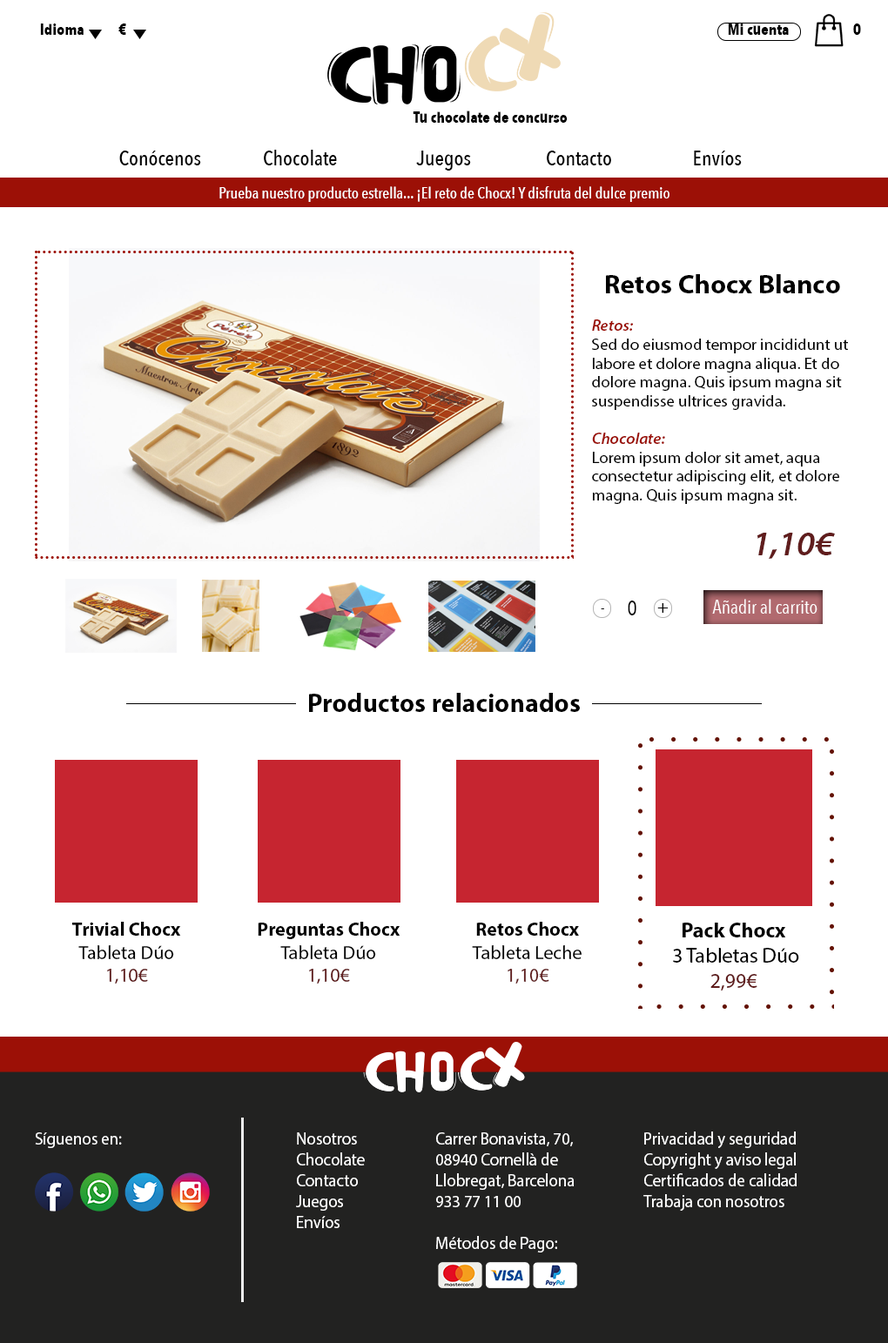
<style>
.page{position:relative;width:888px;height:1343px;background:#ffffff}
.page>*{position:absolute;margin:0}
.t1{font:15.7px "AvenirNextCondensed-Bold";color:#000000}
.t2{font:20.9px "AvenirNextCondensed-Medium";color:#000000}
.t3{font:15.7px "AvenirNextCondensed-Medium";color:#ffffff}
.t4{font:15.7px "MyriadPro-Regular";color:#000000;scale:1.05 1}
.t5{font:26.1px "MyriadPro-Bold";color:#000000;scale:1.05 1}
.t6{font:15.7px "MyriadPro-SemiboldIt";color:#9c1006;scale:1.05 1}
.t7{font:34.8px "MyriadPro-SemiboldIt";color:#601d1d}
.t8{font:20.9px "AvenirNextCondensed-Regular";color:#000000}
.t9{font:19.1px "AvenirNextCondensed-Regular";color:#010101}
.t10{font:19.1px "AvenirNextCondensed-Regular";color:#ffffff}
.t11{font:26.1px "MyriadPro-Bold";color:#000000}
.t12{font:19.1px "MyriadPro-Bold";color:#000000}
.t13{font:19.1px "MyriadPro-Regular";color:#000000}
.t14{font:19.1px "MyriadPro-Regular";color:#601d1d}
.t15{font:20.9px "MyriadPro-Regular";color:#000000}
.t16{font:20.9px "MyriadPro-Bold";color:#000000}
.t17{font:20.9px "MyriadPro-Regular";color:#601d1d}
.t18{font:17.4px "MyriadPro-Regular";color:#ffffff;scale:0.94 1}
</style>
<div class="page">
<p class="t1" style="left:40px;top:24px;width:44px;height:11px">Idioma</p>
<p class="t1" style="left:118px;top:24px;width:8px;height:11px">€</p>
<p class="t1" style="left:728px;top:24px;width:61px;height:11px">Mi cuenta</p>
<p class="t1" style="left:853px;top:24px;width:8px;height:11px">0</p>
<p class="t1" style="left:413px;top:111px;width:155px;height:12px">Tu chocolate de concurso</p>
<p class="t2" style="left:264px;top:150px;width:73px;height:15px">Chocolate</p>
<p class="t2" style="left:119px;top:151px;width:82px;height:14px">Conócenos</p>
<p class="t2" style="left:416px;top:151px;width:55px;height:20px">Juegos</p>
<p class="t2" style="left:547px;top:151px;width:64px;height:14px">Contacto</p>
<p class="t2" style="left:694px;top:151px;width:48px;height:14px">Envíos</p>
<p class="t3" style="left:219px;top:186px;width:450px;height:16px">Prueba nuestro producto estrella... ¡El reto de Chocx! Y disfruta del dulce premio</p>
<p class="t4" style="left:592px;top:274px;width:256px;height:230px;text-align:center"><span class="t5">Retos Chocx Blanco<br><br></span><span class="t6">Retos: <br></span>Sed do eiusmod tempor incididunt ut labore et dolore magna aliqua. Et do dolore magna. Quis ipsum magna sit suspendisse ultrices gravida.<br><br><span class="t6">Chocolate: <br></span>Lorem ipsum dolor sit amet, aqua consectetur adipiscing elit, et dolore magna. Quis ipsum magna sit.</p>
<p class="t7" style="left:757px;top:533px;width:78px;height:26px">1,10€</p>
<p class="t8" style="left:628px;top:601px;width:8px;height:14px">0</p>
<p class="t9" style="left:657px;top:603px;width:11px;height:10px">+</p>
<p class="t10" style="left:712px;top:599px;width:105px;height:15px">Añadir al carrito</p>
<p class="t9" style="left:601px;top:608px;width:3px;height:1px">-</p>
<p class="t11" style="left:309px;top:693px;width:271px;height:19px">Productos relacionados</p>
<p class="t12" style="left:72px;top:922px;width:109px;height:62px;text-align:center">Trivial Chocx<br><span class="t13">Tableta Dúo<br></span><span class="t14">1,10€</span></p>
<p class="t12" style="left:258px;top:922px;width:142px;height:62px;text-align:center">Preguntas Chocx<br><span class="t13">Tableta Dúo<br></span><span class="t14">1,10€</span></p>
<p class="t13" style="left:472px;top:922px;width:109px;height:62px;text-align:center"><span class="t12">Retos Chocx<br></span>Tableta Leche<br><span class="t14">1,10€</span></p>
<p class="t15" style="left:673px;top:923px;width:126px;height:68px;text-align:center"><span class="t16">Pack Chocx<br></span> 3 Tabletas Dúo<br><span class="t17">2,99€</span></p>
<p class="t18" style="left:35px;top:1132px;width:87px;height:16px">Síguenos en:</p>
<p class="t18" style="left:296px;top:1132px;width:69px;height:96px">Nosotros<br>Chocolate<br>Contacto<br>Juegos<br>Envíos</p>
<p class="t18" style="left:436px;top:1132px;width:138px;height:121px">Carrer Bonavista, 70, 08940 Cornellà de Llobregat, Barcelona<br>933 77 11 00<br><br>Métodos de Pago:</p>
<p class="t18" style="left:643px;top:1132px;width:153px;height:79px">Privacidad y seguridad<br>Copyright y aviso legal<br>Certificados de calidad<br>Trabaja con nosotros</p>
</div>
